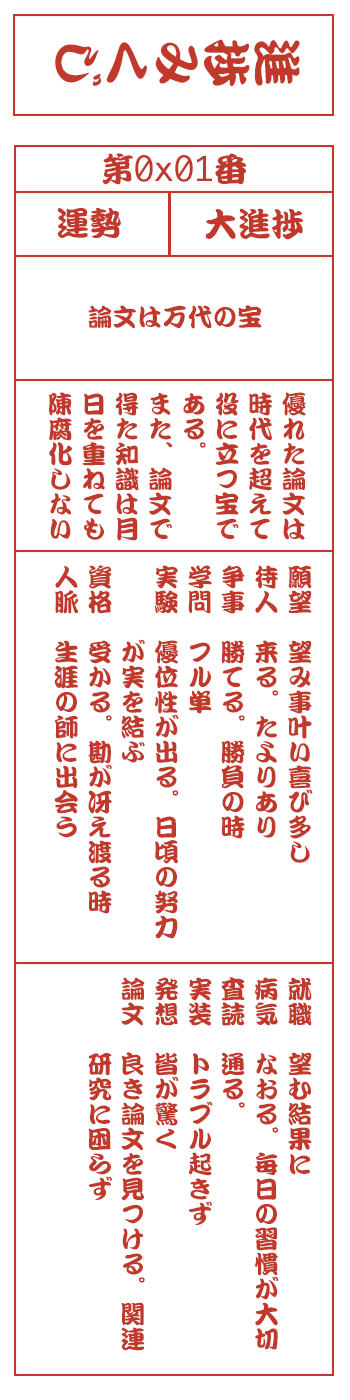
<style>
.page{position:relative;width:350px;height:1400px;background:#ffffff}
.page>*{position:absolute;margin:0}
.t1{font:50px "DFKanTeiRyu-XB-MP-RKSJ-H";color:#c0392b}
.t2{font:33.3px "Monaco";color:#c0392b}
.t3{font:33.3px "DFKanTeiRyu-XB-MP-RKSJ-H";color:#c0392b}
.t4{font:25px "DFKanTeiRyu-XB-MP-RKSJ-H";color:#c0392b}
.t5{font:25px/33.3px "DFKanTeiRyu-XB-MP-RKSJ-H";color:#c0392b}
</style>
<div class="page">
<p class="t1" style="left:55px;top:39px;width:245px;height:47px;rotate:90deg">進捗みくじ</p>
<p class="t2" style="left:102px;top:153px;width:144px;height:32px"><span class="t3">第</span>0x01<span class="t3">番</span></p>
<p class="t3" style="left:57px;top:207px;width:64px;height:31px">運勢</p>
<p class="t3" style="left:205px;top:208px;width:98px;height:32px">大進捗</p>
<p class="t4" style="left:88px;top:305px;width:174px;height:24px">論文は万代の宝</p>
<p class="t5" style="left:48px;top:392px;width:258px;height:149px">優れた論文は<br>時代を超えて<br>役に立つ宝で<br>ある。<br>また、論文で<br>得た知識は月<br>日を重ねても<br>陳腐化しない</p>
<p class="t5" style="left:54px;top:565px;width:259px;height:374px">願望　望み事叶い喜び多し<br>待人　来る。たよりあり<br>争事　勝てる。勝負の時<br>学問　フル単<br>実験　優位性が出る。日頃の努力<br>　　　が実を結ぶ<br>資格　受かる。勘が冴え渡る時<br>人脈　生涯の師に出会う</p>
<p class="t5" style="left:88px;top:977px;width:224px;height:374px">就職　望む結果に<br>病気　なおる。毎日の習慣が大切<br>査読　通る。<br>実装　トラブル起きず<br>発想　皆が驚く<br>論文　良き論文を見つける。関連<br>　　　研究に困らず</p>
</div>
